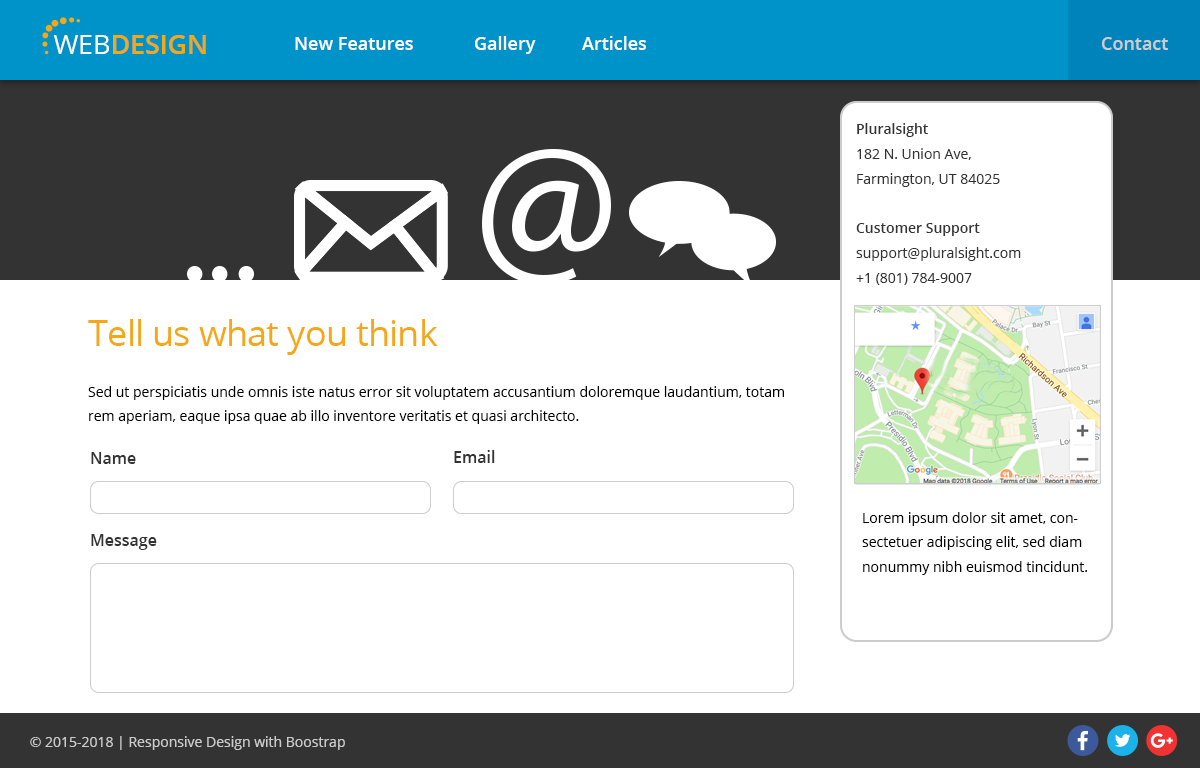
<style>
.page{position:relative;width:1200px;height:768px;background:#ffffff}
.page>*{position:absolute;margin:0}
.t1{font:26.7px "OpenSans-Semibold";color:#f6a716}
.t2{font:26.7px "OpenSans";color:#ffffff}
.t3{font:18px "OpenSans-Semibold";color:#ffffff}
.t4{font:18px "OpenSans-Semibold";color:#cccccc}
.t5{font:14px/24.8px "OpenSans";color:#333333}
.t6{font:14px/24.8px "OpenSans-Semibold";color:#333333}
.t7{font:36px "OpenSans";letter-spacing:-0.02em;color:#f6a716}
.t8{font:14px/24.8px "OpenSans";color:#000000}
.t9{font:16px "OpenSans-Semibold";color:#333333}
.t10{font:14px "OpenSans";color:#cccccc}
</style>
<div class="page">
<p class="t1" style="left:53px;top:35px;width:153px;height:19px"><span class="t2">WEB</span>DESIGN</p>
<p class="t3" style="left:295px;top:36px;width:351px;height:18px">New Features  Gallery  Articles</p>
<p class="t4" style="left:1101px;top:37px;width:67px;height:13px">Contact</p>
<p class="t5" style="left:856px;top:123px;width:165px;height:162px"><span class="t6">Pluralsight<br></span>182 N. Union Ave, <br>Farmington, UT 84025<br><br><span class="t6">Customer Support<br></span>support@pluralsight.com<br>+1 (801) 784-9007</p>
<p class="t7" style="left:88px;top:319px;width:350px;height:36px">Tell us what you think</p>
<p class="t8" style="left:88px;top:386px;width:696px;height:38px">Sed ut perspiciatis unde omnis iste natus error sit voluptatem accusantium doloremque laudantium, totam rem aperiam, eaque ipsa quae ab illo inventore veritatis et quasi architecto.</p>
<p class="t9" style="left:91px;top:452px;width:45px;height:12px">Name</p>
<p class="t9" style="left:454px;top:450px;width:41px;height:13px">Email</p>
<p class="t8" style="left:862px;top:512px;width:225px;height:63px">Lorem ipsum dolor sit amet, consectetuer adipiscing elit, sed diam nonummy nibh euismod tincidunt.</p>
<p class="t9" style="left:91px;top:534px;width:66px;height:16px">Message</p>
<p class="t10" style="left:30px;top:736px;width:315px;height:14px">© 2015-2018 | Responsive Design with Boostrap</p>
</div>
